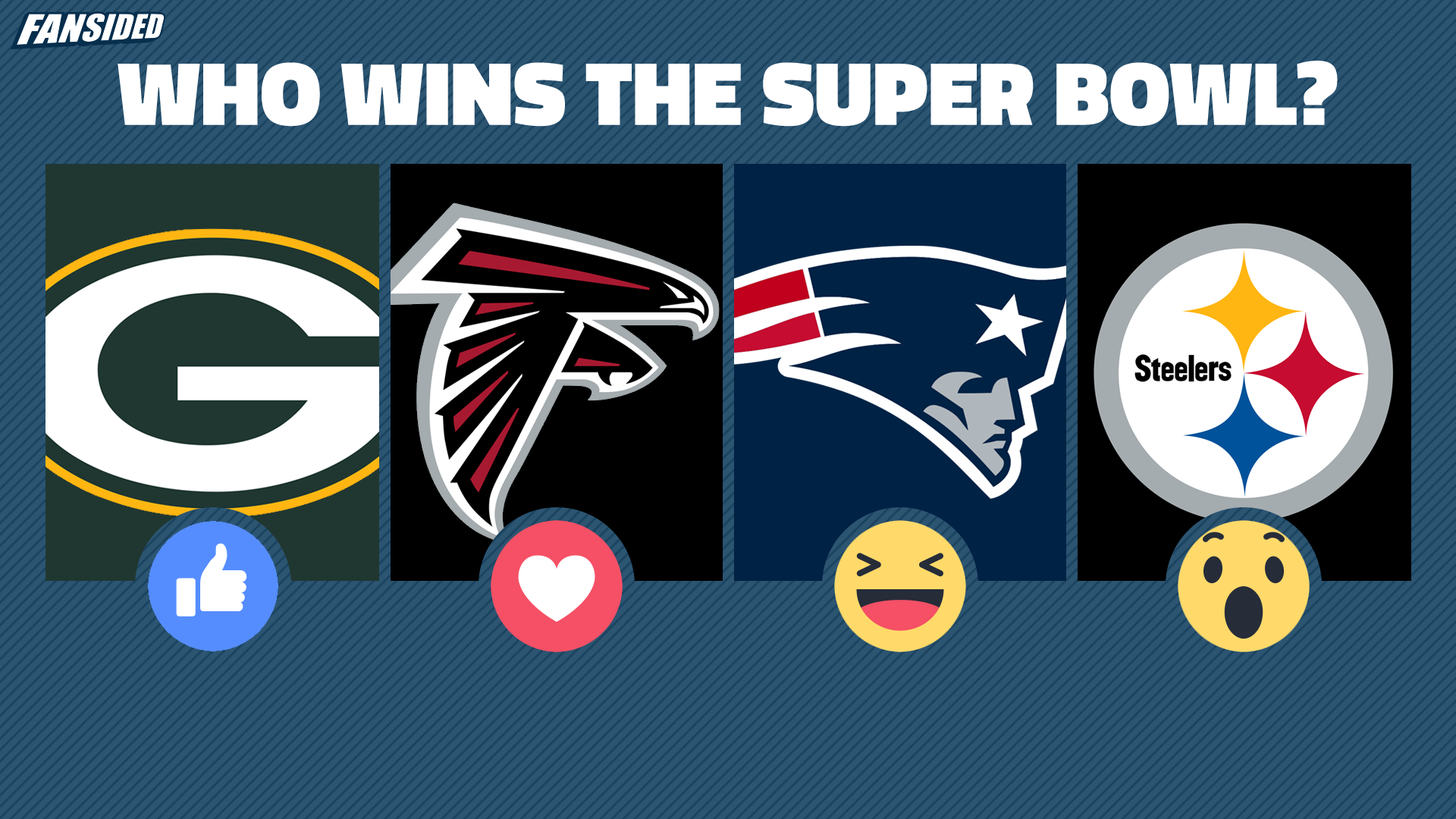
<style>
.page{position:relative;width:1456px;height:819px}
.page>*{position:absolute;margin:0}
.t1{font:91px "TitilliumWeb-Black";color:#ffffff}
</style>
<div class="page">
<p class="t1" style="left:118px;top:61px;width:1220px;height:66px">WHO WINS THE SUPER BOWL?</p>
</div>
